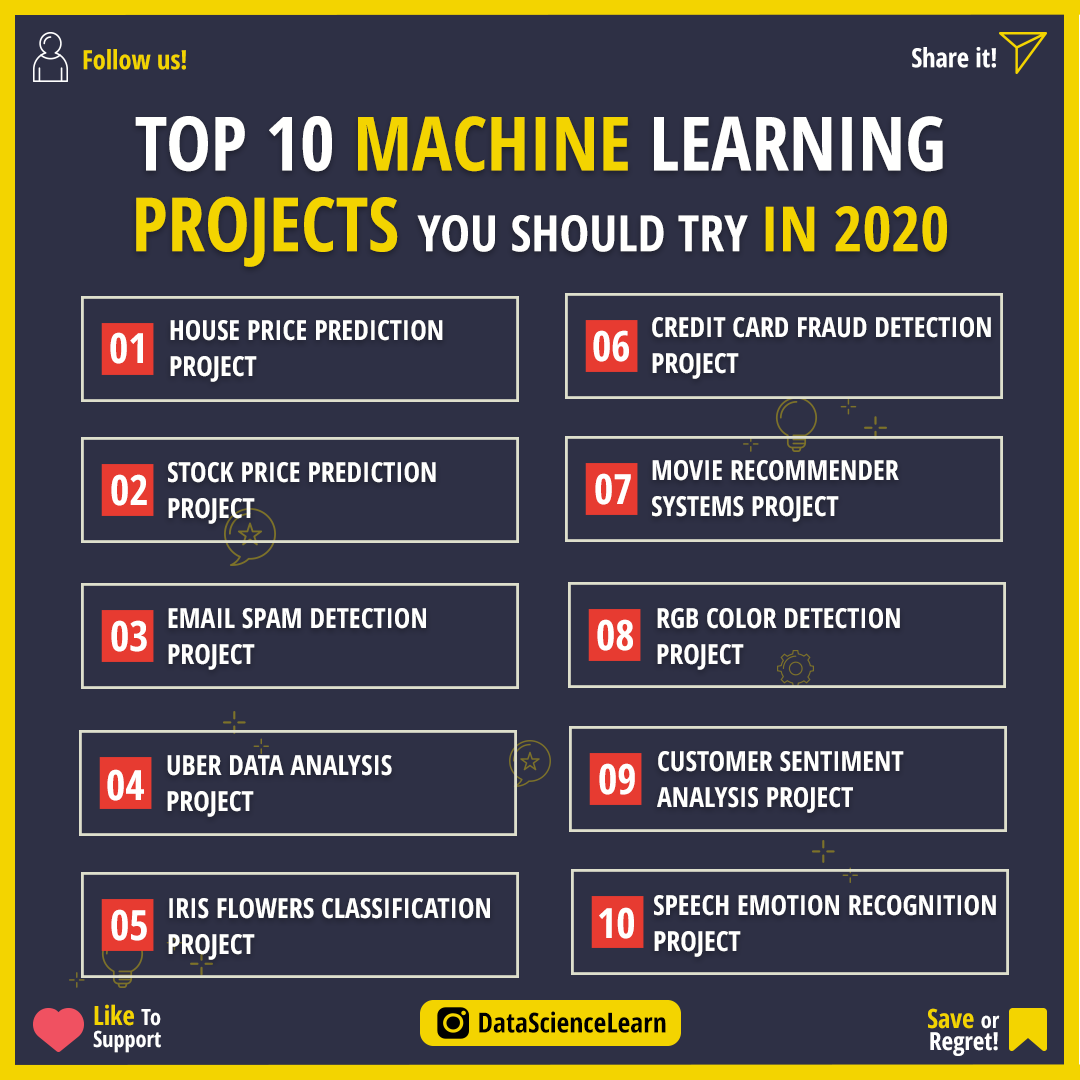
<style>
.page{position:relative;width:1080px;height:1080px;background:#2e3045}
.page>*{position:absolute;margin:0}
.t1{font:26.4px "OpenSans-CondensedBold";color:#f3d400}
.t2{font:26.4px "OpenSans-CondensedBold";color:#ffffff}
.t3{font:50px/80.6px "OpenSans-CondensedBold";color:#fffffe}
.t4{font:75px/80.6px "OpenSans-CondensedBold";color:#fffffe}
.t5{font:75px/80.6px "OpenSans-CondensedBold";color:#f3d400}
.t6{font:62.5px/80.6px "OpenSans-CondensedBold";color:#f3d400}
.t7{font:27.8px/36.1px "OpenSans-CondensedBold";color:#fffffe}
.t8{font:41.7px "OpenSans-CondensedBold";color:#fffffe}
.t9{font:22.2px/22.2px "OpenSans-CondensedBold";color:#ffffff}
.t10{font:26.4px/22.2px "OpenSans-CondensedBold";color:#f3d400}
.t11{font:27.8px "OpenSans-CondensedBold";color:#000000}
.t12{font:25px/22.2px "OpenSans-CondensedBold";color:#ffffff}
</style>
<div class="page">
<p class="t1" style="left:83px;top:49px;width:103px;height:21px">Follow us!</p>
<p class="t2" style="left:912px;top:47px;width:84px;height:21px">Share it!</p>
<p class="t3" style="left:135px;top:116px;width:812px;height:151px;text-align:center"><span class="t4">TOP 10 </span><span class="t5">MACHINE </span><span class="t4">LEARNING<br></span><span class="t5">PROJECTS </span>YOU SHOULD TRY <span class="t6">IN 2020</span></p>
<p class="t7" style="left:652px;top:317px;width:339px;height:62px">CREDIT CARD FRAUD DETECTION <br>PROJECT</p>
<p class="t7" style="left:170px;top:320px;width:273px;height:62px">HOUSE PRICE PREDICTION <br>PROJECT</p>
<p class="t8" style="left:110px;top:332px;width:33px;height:32px">01</p>
<p class="t8" style="left:593px;top:330px;width:36px;height:32px">06</p>
<p class="t7" style="left:168px;top:462px;width:268px;height:62px">STOCK PRICE PREDICTION <br>PROJECT</p>
<p class="t7" style="left:652px;top:460px;width:247px;height:62px">MOVIE RECOMMENDER <br>SYSTEMS PROJECT</p>
<p class="t8" style="left:595px;top:473px;width:36px;height:32px">07</p>
<p class="t8" style="left:111px;top:474px;width:36px;height:32px">02</p>
<p class="t7" style="left:168px;top:608px;width:258px;height:62px">EMAIL SPAM DETECTION<br>PROJECT</p>
<p class="t7" style="left:657px;top:608px;width:243px;height:62px">RGB COLOR DETECTION <br>PROJECT</p>
<p class="t8" style="left:111px;top:620px;width:36px;height:32px">03</p>
<p class="t8" style="left:597px;top:619px;width:36px;height:32px">08</p>
<p class="t7" style="left:167px;top:755px;width:225px;height:62px">UBER DATA ANALYSIS<br>PROJECT</p>
<p class="t7" style="left:657px;top:751px;width:247px;height:62px">CUSTOMER SENTIMENT <br>ANALYSIS PROJECT</p>
<p class="t8" style="left:107px;top:769px;width:37px;height:32px">04</p>
<p class="t8" style="left:599px;top:763px;width:36px;height:32px">09</p>
<p class="t7" style="left:168px;top:898px;width:322px;height:62px">IRIS FLOWERS CLASSIFICATION <br>PROJECT</p>
<p class="t7" style="left:654px;top:895px;width:342px;height:62px">SPEECH EMOTION RECOGNITION <br>PROJECT</p>
<p class="t8" style="left:111px;top:909px;width:36px;height:32px">05</p>
<p class="t8" style="left:599px;top:907px;width:35px;height:32px">10</p>
<p class="t9" style="left:93px;top:1004px;width:68px;height:49px"><span class="t10">Like </span>To<br>Support</p>
<p class="t11" style="left:479px;top:1011px;width:187px;height:22px">DataScienceLearn</p>
<p class="t12" style="left:928px;top:1008px;width:72px;height:48px;text-align:right"><span class="t10">Save </span><span class="t9">or<br></span>Regret!</p>
</div>
